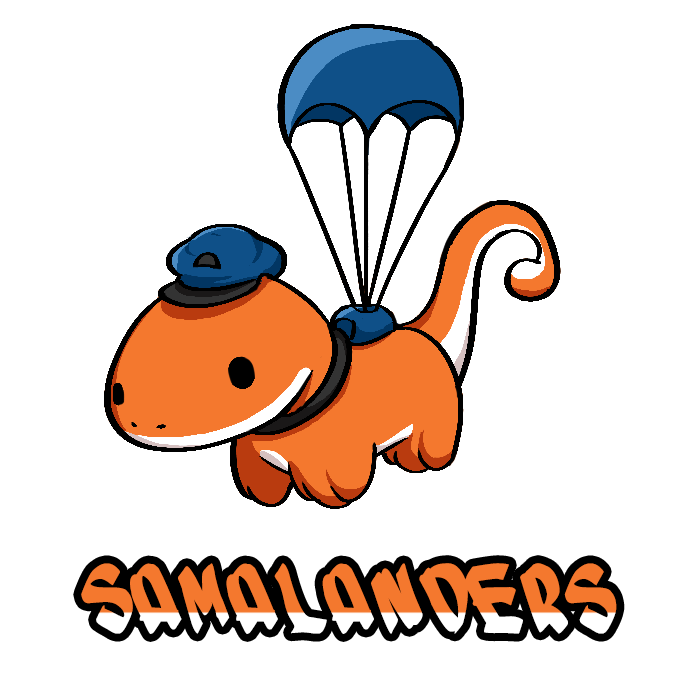
<style>
.page{position:relative;width:698px;height:696px;background:#ffffff}
.page>*{position:absolute;margin:0}
.t1{font:77px "SUPER";letter-spacing:-0.06em;color:#f4782e}
</style>
<div class="page">
<p class="t1" style="left:81px;top:563px;width:536px;height:71px">Samalanders</p>
</div>
